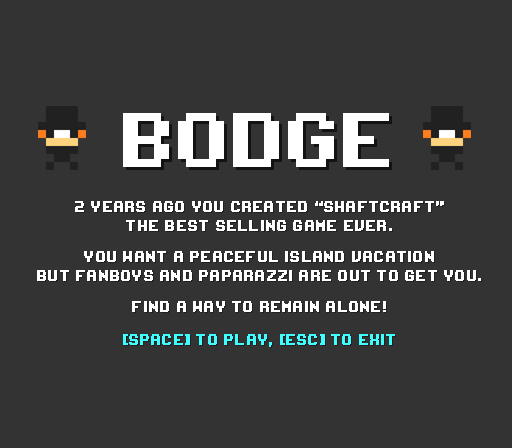
<style>
.page{position:relative;width:512px;height:448px;background:#333333}
.page>*{position:absolute;margin:0}
.t1{font:123px "Zaratustra-Bigital";letter-spacing:0.01em;color:#ffffff}
.t2{font:24px/19px "Zaratustra-Bigital";letter-spacing:0.01em;color:#ffffff}
.t3{font:24px "Zaratustra-Bigital";letter-spacing:0.01em;color:#3ffeff}
</style>
<div class="page">
<p class="t1" style="left:123px;top:113px;width:266px;height:54px">BODGE</p>
<p class="t2" style="left:37px;top:201px;width:444px;height:111px;text-align:center">2 YEARS AGO YOU CREATED “SHAFTCRAFT”<br>THE BEST SELLING GAME EVER.<br><br>YOU WANT A PEACEFUL ISLAND VACATION<br>BUT FANBOYS AND PAPARAZZI ARE OUT TO GET YOU.<br><br>FIND A WAY TO REMAIN ALONE!</p>
<p class="t3" style="left:123px;top:334px;width:272px;height:13px">[SPACE] TO PLAY, [ESC] TO EXIT</p>
</div>
